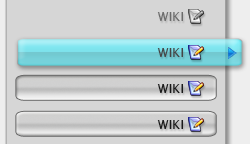
<style>
.page{position:relative;width:250px;height:144px;background:#d6d6d6}
.page>*{position:absolute;margin:0}
.t1{font:12.3px "LucidaSans";letter-spacing:0.006em;color:#6b6b6b}
.t2{font:12.3px "LucidaSans";letter-spacing:0.006em;color:#454545}
.t3{font:12.3px "LucidaSans";letter-spacing:0.006em;color:#191919}
</style>
<div class="page">
<p class="t1" style="left:157px;top:12px;width:26px;height:9px">WIKI</p>
<p class="t2" style="left:157px;top:48px;width:26px;height:9px">WIKI</p>
<p class="t3" style="left:157px;top:84px;width:26px;height:9px">WIKI</p>
<p class="t3" style="left:157px;top:120px;width:26px;height:9px">WIKI</p>
</div>
